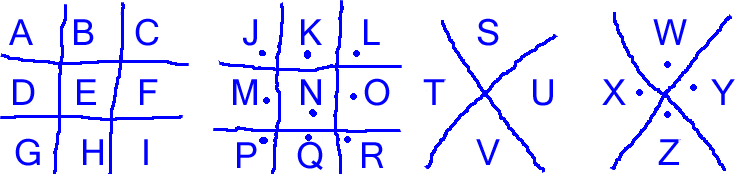
<style>
.page{position:relative;width:735px;height:174px;background:#ffffff}
.page>*{position:absolute;margin:0}
.t1{font:36px "MicrosoftSansSerif";letter-spacing:0.4em;color:#0000ff}
</style>
<div class="page">
<p class="t1" style="left:9px;top:18px;width:150px;height:28px">A B C</p>
<p class="t1" style="left:243px;top:19px;width:137px;height:27px">J K L</p>
<p class="t1" style="left:477px;top:18px;width:22px;height:28px">S</p>
<p class="t1" style="left:653px;top:19px;width:34px;height:26px">W</p>
<p class="t1" style="left:233px;top:78px;width:157px;height:28px">M N O</p>
<p class="t1" style="left:13px;top:79px;width:145px;height:26px">D E F</p>
<p class="t1" style="left:423px;top:79px;width:22px;height:26px">T</p>
<p class="t1" style="left:533px;top:79px;width:20px;height:27px">U</p>
<p class="t1" style="left:602px;top:79px;width:24px;height:26px">X</p>
<p class="t1" style="left:711px;top:79px;width:24px;height:26px">Y</p>
<p class="t1" style="left:15px;top:138px;width:133px;height:28px">G H I</p>
<p class="t1" style="left:237px;top:141px;width:147px;height:29px">P Q R</p>
<p class="t1" style="left:476px;top:139px;width:24px;height:26px">V</p>
<p class="t1" style="left:658px;top:139px;width:21px;height:26px">Z</p>
</div>
